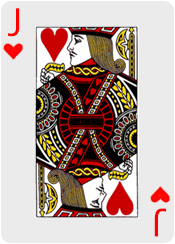
<style>
.page{position:relative;width:175px;height:244px;background:#ebebeb}
.page>*{position:absolute;margin:0}
.t1{font:36px "KozGoPr6N-Regular";color:#ff0000}
</style>
<div class="page">
<p class="t1" style="left:7px;top:8px;width:13px;height:29px">J</p>
<p class="t1" style="left:154px;top:208px;width:13px;height:29px;rotate:-180deg">J</p>
</div>
